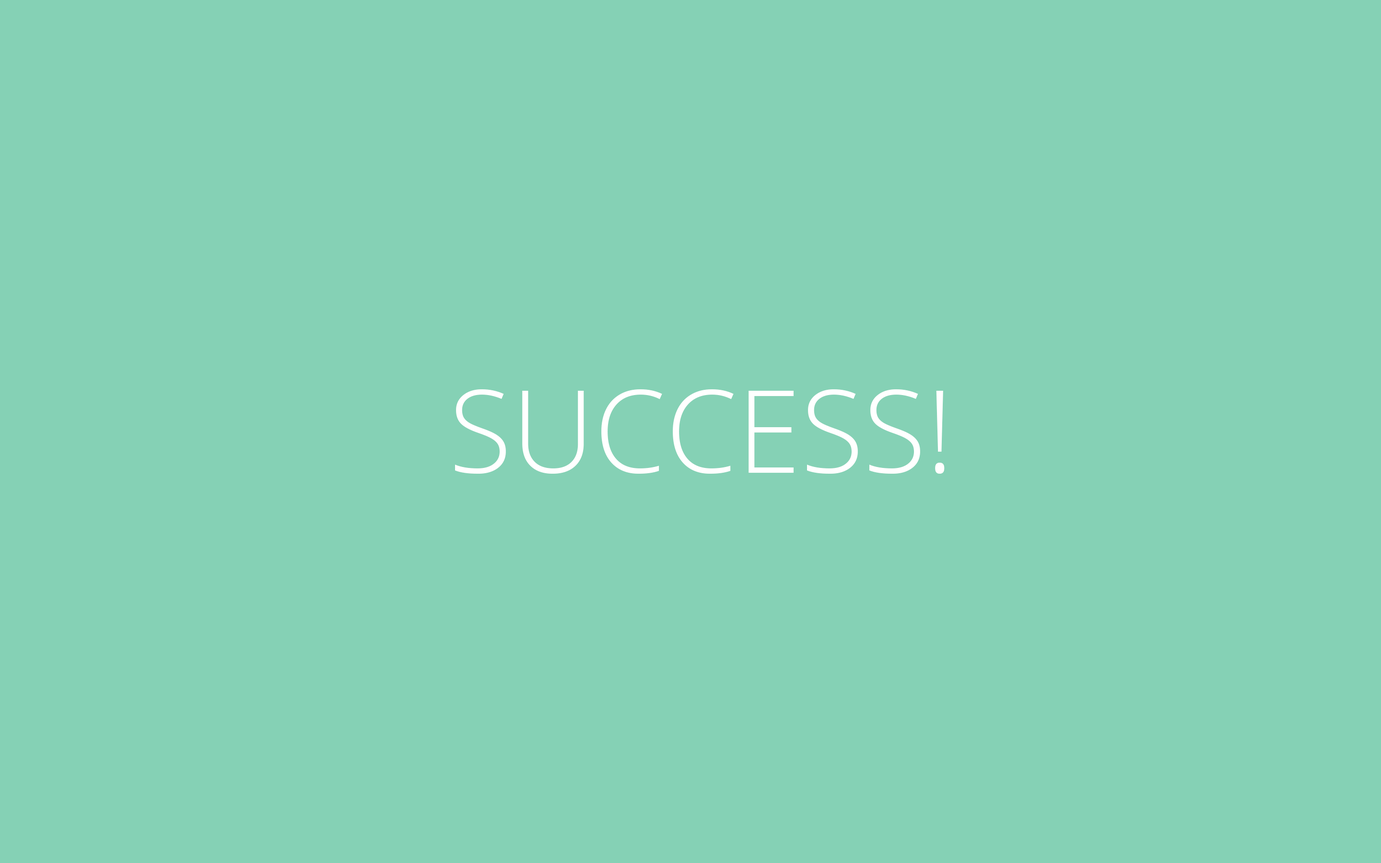
<style>
.page{position:relative;width:1381px;height:863px;background:#85d1b5}
.page>*{position:absolute;margin:0}
.t1{font:115.1px "OpenSans-Light";color:#ffffff}
</style>
<div class="page">
<p class="t1" style="left:455px;top:389px;width:490px;height:85px">SUCCESS!</p>
</div>
